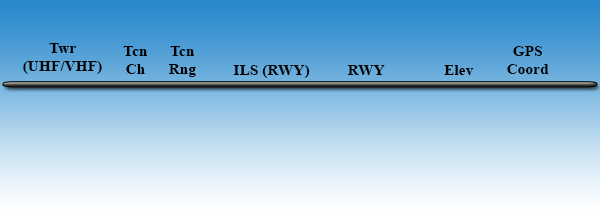
<style>
.page{position:relative;width:600px;height:214px}
.page>*{position:absolute;margin:0}
.t1{font:15.4px "TimesNewRomanPS-BoldMT";color:#000000}
</style>
<div class="page">
<p class="t1" style="left:23px;top:43px;width:79px;height:31px;text-align:center">Twr<br>(UHF/VHF)</p>
<p class="t1" style="left:123px;top:46px;width:24px;height:28px;text-align:center">Tcn<br>Ch</p>
<p class="t1" style="left:168px;top:46px;width:28px;height:31px;text-align:center">Tcn<br>Rng</p>
<p class="t1" style="left:507px;top:46px;width:42px;height:28px;text-align:center">GPS<br>Coord</p>
<p class="t1" style="left:233px;top:65px;width:77px;height:13px">ILS (RWY)</p>
<p class="t1" style="left:347px;top:65px;width:38px;height:10px">RWY</p>
<p class="t1" style="left:444px;top:65px;width:30px;height:10px">Elev</p>
</div>
